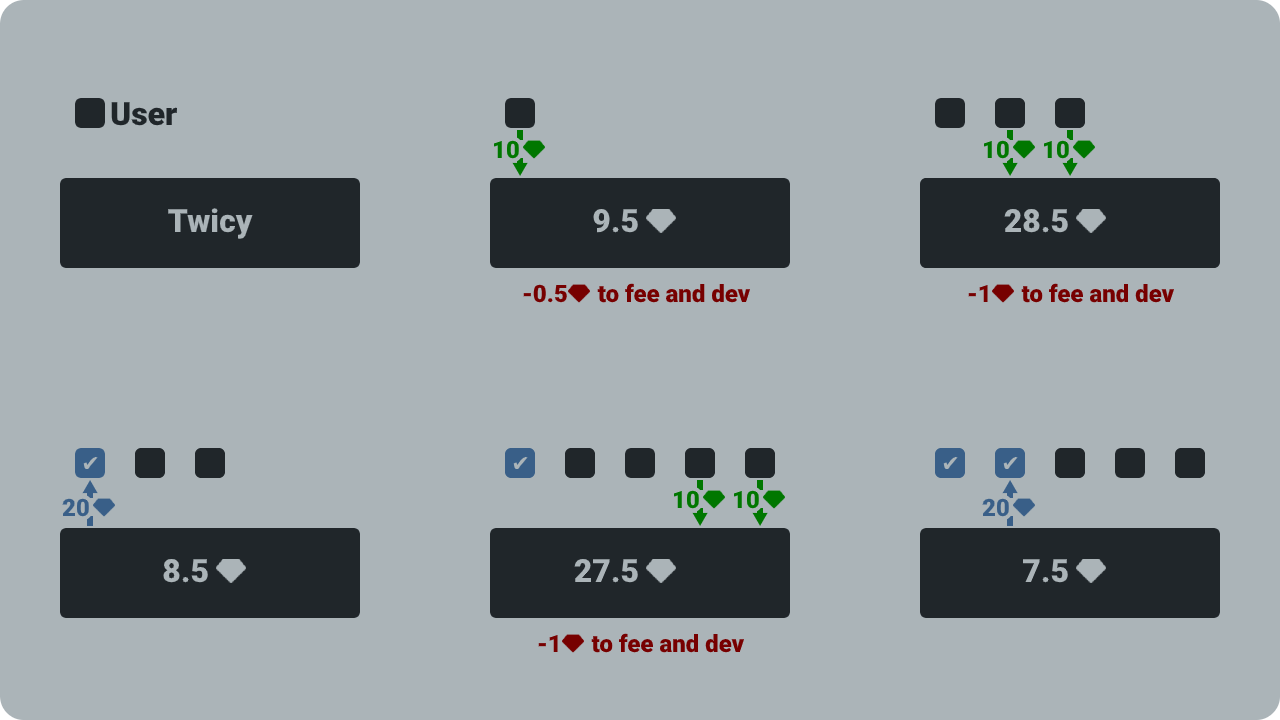
<style>
.page{position:relative;width:1280px;height:720px;background:#abb4b8}
.page>*{position:absolute;margin:0}
.t1{font:32px "Roboto-Black";color:#20262a}
.t2{font:24px "Roboto-Black";color:#007700}
.t3{font:32px "Roboto-Black";color:#abb4b8}
.t4{font:24px "Roboto-Black";color:#770000}
.t5{font:22px "DejaVuSans";color:#abb4b8}
.t6{font:24px "Roboto-Black";color:#395f88}
</style>
<div class="page">
<p class="t1" style="left:111px;top:102px;width:66px;height:24px">User</p>
<p class="t2" style="left:493px;top:140px;width:26px;height:19px">10</p>
<p class="t2" style="left:983px;top:140px;width:26px;height:19px">10</p>
<p class="t2" style="left:1043px;top:140px;width:26px;height:19px">10</p>
<p class="t3" style="left:168px;top:208px;width:85px;height:31px">Twicy</p>
<p class="t3" style="left:593px;top:208px;width:45px;height:25px">9.5</p>
<p class="t3" style="left:1004px;top:208px;width:64px;height:25px">28.5</p>
<p class="t4" style="left:523px;top:283px;width:228px;height:20px">-0.5     to fee and dev</p>
<p class="t4" style="left:968px;top:283px;width:206px;height:20px">-1     to fee and dev</p>
<p class="t5" style="left:83px;top:457px;width:15px;height:13px">✔</p>
<p class="t5" style="left:513px;top:457px;width:15px;height:13px">✔</p>
<p class="t5" style="left:943px;top:457px;width:15px;height:13px">✔</p>
<p class="t5" style="left:1003px;top:457px;width:15px;height:13px">✔</p>
<p class="t2" style="left:673px;top:490px;width:26px;height:19px">10</p>
<p class="t2" style="left:733px;top:490px;width:26px;height:19px">10</p>
<p class="t6" style="left:62px;top:498px;width:27px;height:19px">20</p>
<p class="t6" style="left:982px;top:498px;width:27px;height:19px">20</p>
<p class="t3" style="left:163px;top:558px;width:45px;height:25px">8.5</p>
<p class="t3" style="left:574px;top:558px;width:64px;height:25px">27.5</p>
<p class="t3" style="left:1023px;top:559px;width:45px;height:24px">7.5</p>
<p class="t4" style="left:538px;top:633px;width:206px;height:20px">-1     to fee and dev</p>
</div>
